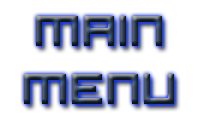
<style>
.page{position:relative;width:200px;height:120px;background:#ffffff}
.page>*{position:absolute;margin:0}
.t1{font:48px "Hooge0553"}
</style>
<div class="page">
<p class="t1" style="left:24px;top:16px;width:150px;height:88px;text-align:center">main<br>menu</p>
</div>
